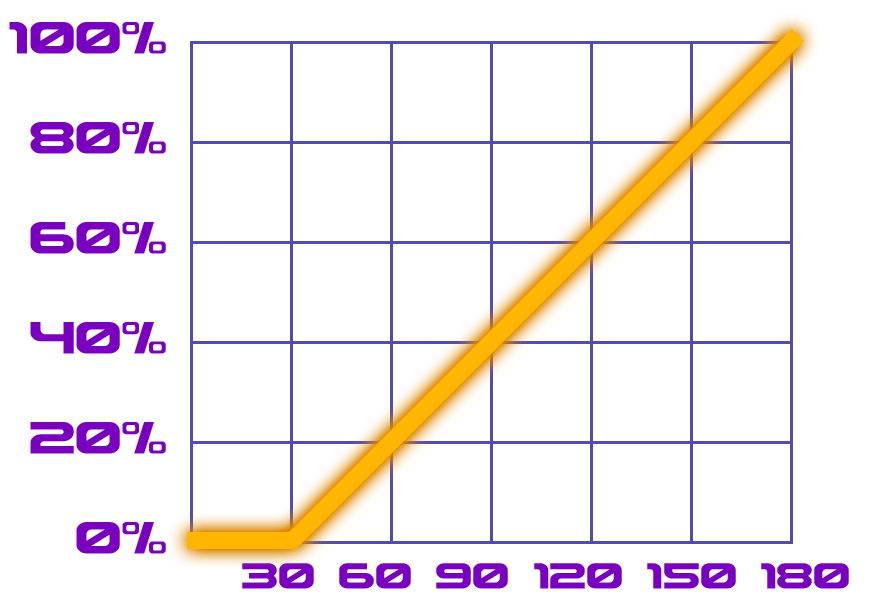
<style>
.page{position:relative;width:880px;height:600px;background:#ffffff}
.page>*{position:absolute;margin:0}
.t1{font:60px/100px "ASTERA";color:#7900bf}
.t2{font:48px "ASTERA";color:#7900bf}
</style>
<div class="page">
<p class="t1" style="left:9px;top:22px;width:157px;height:532px;text-align:right">100%<br>80%<br>60%<br>40%<br>20%<br>0%</p>
<p class="t2" style="left:242px;top:563px;width:607px;height:26px">30 60 90 120 150 180</p>
</div>
